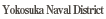
<style>
.page{position:relative;width:106px;height:19px;background:#ffffff}
.page>*{position:absolute;margin:0}
.t1{font:12px "RyuminPro-ExBold";letter-spacing:-0.08em;color:#4c4843;scale:0.85 1}
</style>
<div class="page">
<p class="t1" style="left:2px;top:5px;width:102px;height:10px">Yokosuka Naval District</p>
</div>
